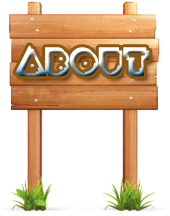
<style>
.page{position:relative;width:170px;height:216px;background:#ffffff}
.page>*{position:absolute;margin:0}
.t1{font:33.3px "CrackMan";font-weight:bold}
</style>
<div class="page">
<p class="t1" style="left:15px;top:45px;width:135px;height:32px">about</p>
</div>
